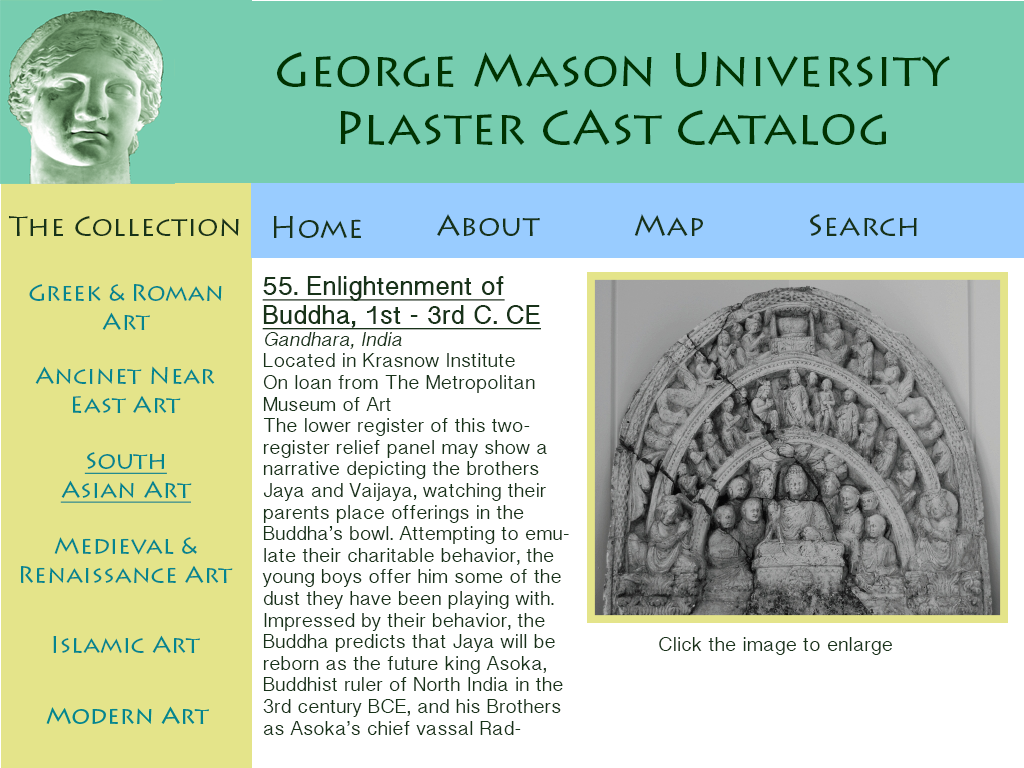
<style>
.page{position:relative;width:1024px;height:768px;background:#ffffff}
.page>*{position:absolute;margin:0}
.t1{font:48px "LithosPro-Regular";color:#003300}
.t2{font:28px "LithosPro-Regular";color:#183319}
.t3{font:30px "LithosPro-Regular";color:#183319}
.t4{font:24px "LithosPro-Regular";color:#183319}
.t5{font:18px "BanglaSangamMN";color:#183319}
.t6{font:24px "BanglaSangamMN-Bold";color:#183319;text-decoration:underline}
.t7{font:18px "BanglaSangamMN";color:#183319;font-style:italic}
.t8{font:24px "LithosPro-Regular";color:#04858f}
.t9{font:24px "LithosPro-Regular";color:#04858f;text-decoration:underline}
</style>
<div class="page">
<p class="t1" style="left:277px;top:52px;width:673px;height:93px;text-align:center">George Mason University<br>Plaster CAst Catalog</p>
<p class="t2" style="left:9px;top:216px;width:230px;height:20px">The Collection</p>
<p class="t3" style="left:273px;top:216px;width:88px;height:22px"><span class="t4"><br></span>Home</p>
<p class="t3" style="left:437px;top:214px;width:103px;height:22px"><span class="t4"><br></span>About</p>
<p class="t3" style="left:634px;top:214px;width:69px;height:22px"><span class="t4"><br></span>Map</p>
<p class="t3" style="left:810px;top:214px;width:107px;height:22px"><span class="t4"><br></span>Search</p>
<p class="t5" style="left:262px;top:276px;width:307px;height:459px"><span class="t6">55. Enlightenment of Buddha, 1st - 3rd C. CE<br></span><span class="t7">Gandhara, India<br></span>Located in Krasnow Institute<br>On loan from The Metropolitan Museum of Art<br>The lower register of this two- register relief panel may show a narrative depicting the brothers Jaya and Vaijaya, watching their parents place offerings in the<br>Buddha’s bowl. Attempting to emulate their charitable behavior, the young boys offer him some of the dust they have been playing with. Impressed by their behavior, the Buddha predicts that Jaya will be reborn as the future king Asoka, Buddhist ruler of North India in the 3rd century BCE, and his Brothers as Asoka’s chief vassal Radhagupta.</p>
<p class="t8" style="left:29px;top:284px;width:193px;height:46px;text-align:center"><span class="t4"><br></span>Greek &amp; Roman<br>Art</p>
<p class="t8" style="left:35px;top:366px;width:180px;height:47px;text-align:center">Ancinet Near <br>East Art</p>
<p class="t9" style="left:60px;top:452px;width:132px;height:51px;text-align:center"><span class="t4"><br></span>South<br>Asian Art</p>
<p class="t8" style="left:20px;top:537px;width:213px;height:46px;text-align:center"><span class="t4"><br></span>Medieval &amp; <br>Renaissance Art</p>
<p class="t8" style="left:53px;top:635px;width:147px;height:18px"><span class="t4"><br></span>Islamic Art</p>
<p class="t5" style="left:659px;top:637px;width:233px;height:18px">Click the image to enlarge</p>
</div>
